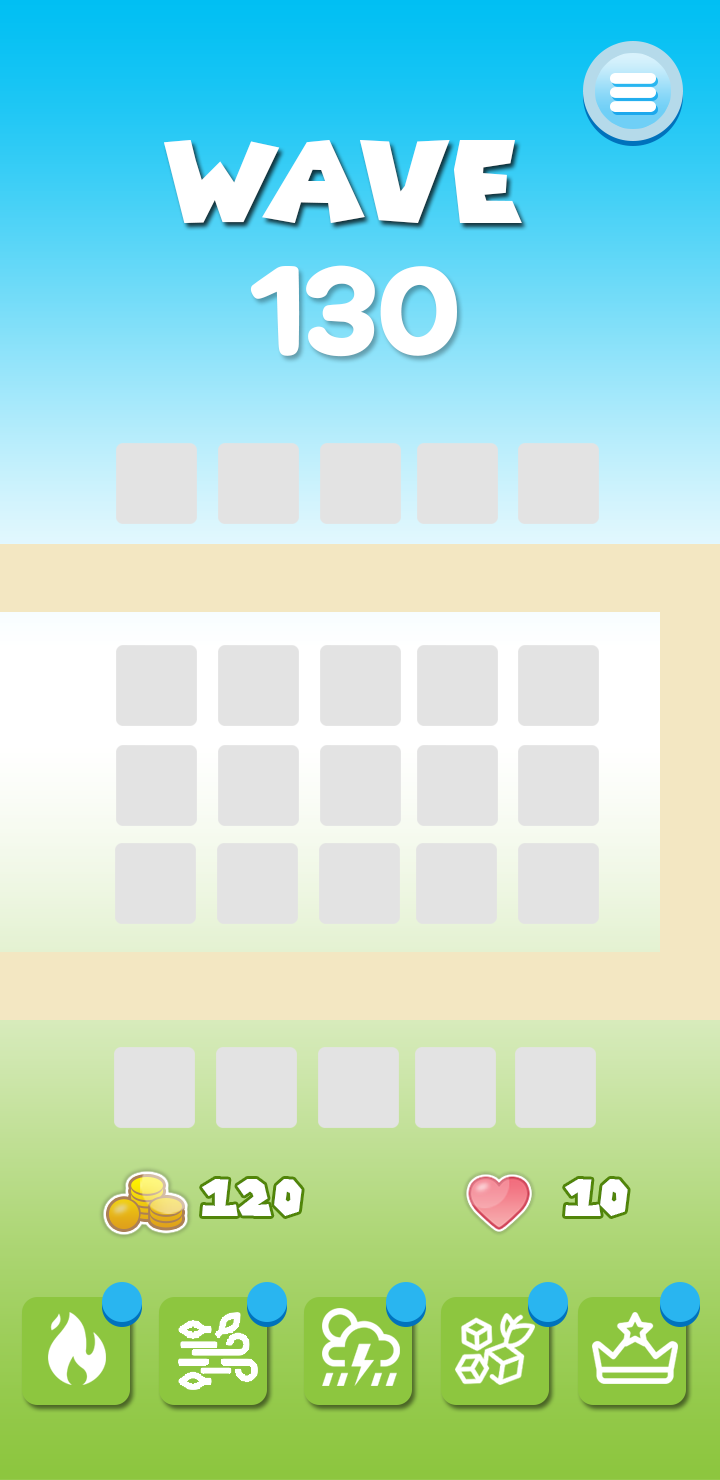
<style>
.page{position:relative;width:720px;height:1480px}
.page>*{position:absolute;margin:0}
.t1{font:111.9px "SuperMarioGalaxy";color:#ffffff}
.t2{font:117.8px "MaplestoryBold";color:#ffffff;font-weight:bold}
.t3{font:50px "SuperMarioGalaxy";color:#ffffff}
</style>
<div class="page">
<p class="t1" style="left:164px;top:140px;width:358px;height:83px">wave</p>
<p class="t2" style="left:250px;top:265px;width:207px;height:92px">130</p>
<p class="t3" style="left:202px;top:1179px;width:100px;height:37px">120</p>
<p class="t3" style="left:565px;top:1179px;width:63px;height:37px">10</p>
</div>
